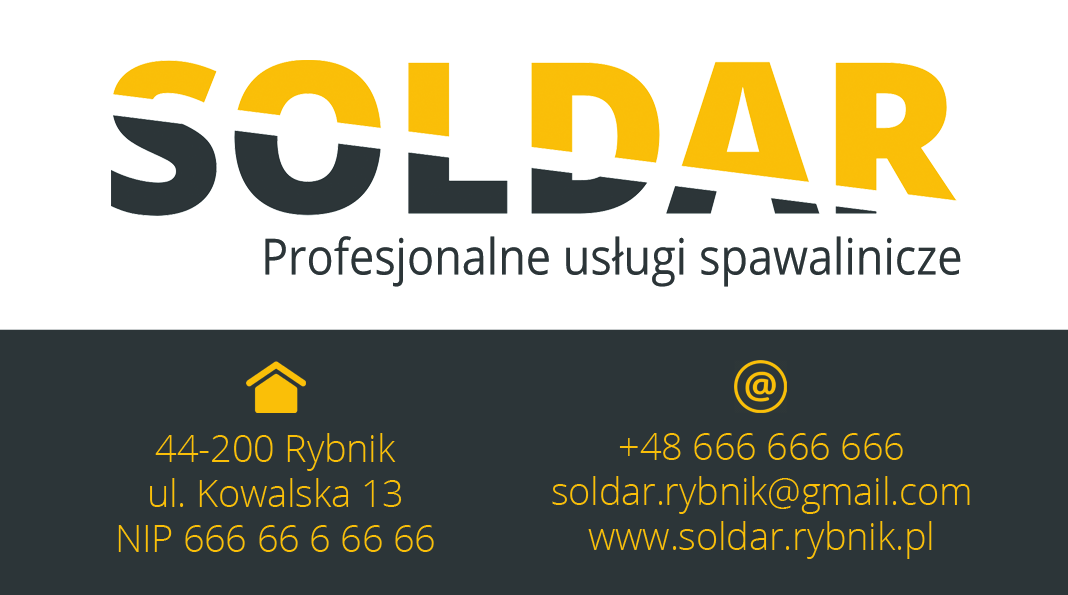
<style>
.page{position:relative;width:1068px;height:595px;background:#2c3538}
.page>*{position:absolute;margin:0}
.t1{font:50px "OpenSans";color:#2c3538;scale:0.9 1}
.t2{font:37.5px "OpenSans-Light";color:#fabf08}
</style>
<div class="page">
<p class="t1" style="left:265px;top:236px;width:696px;height:51px">Profesjonalne usługi spawalinicze</p>
<p class="t2" style="left:118px;top:433px;width:316px;height:119px;text-align:center">44-200 Rybnik<br>ul. Kowalska 13<br>NIP 666 66 6 66 66</p>
<p class="t2" style="left:552px;top:433px;width:418px;height:126px;text-align:center">+48 666 666 666<br>soldar.rybnik@gmail.com<br>www.soldar.rybnik.pl</p>
</div>
